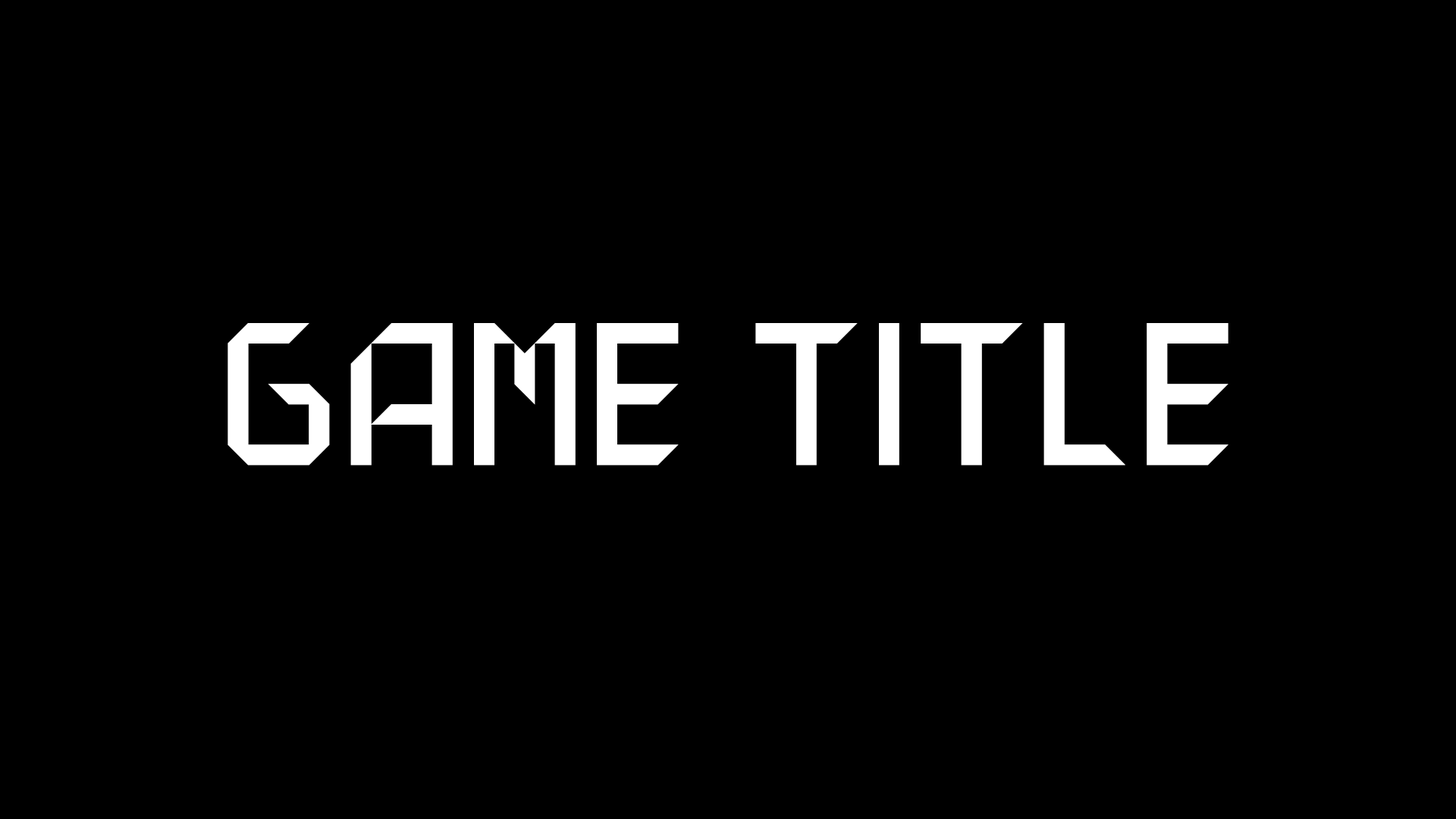
<style>
.page{position:relative;width:1456px;height:819px;background:#000000}
.page>*{position:absolute;margin:0}
.t1{font:201.2px "RMSSansRegular";letter-spacing:0.04em;color:#ffffff}
</style>
<div class="page">
<p class="t1" style="left:227px;top:323px;width:1001px;height:143px">GAME TITLE</p>
</div>
